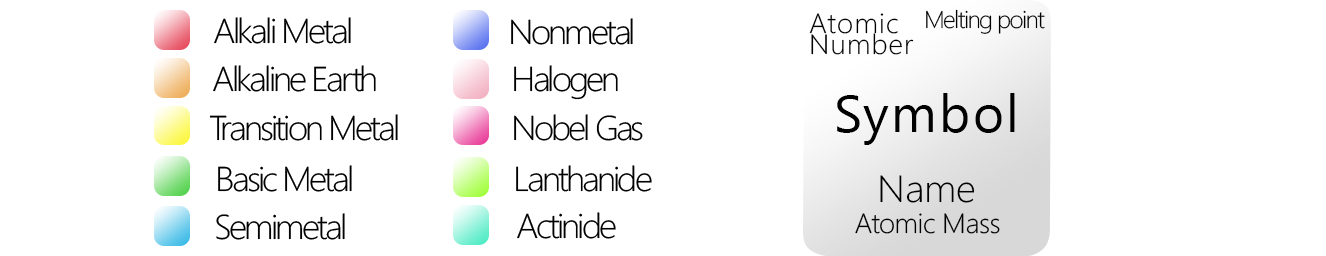
<style>
.page{position:relative;width:1326px;height:256px;background:#ffffff}
.page>*{position:absolute;margin:0}
.t1{font:34.6px "SegoeUI-Light";letter-spacing:-0.08em;color:#000000;scale:1.03 1}
.t2{font:27.7px/20.8px "SegoeUI-Light";letter-spacing:0.04em;color:#000000;scale:1.03 1}
.t3{font:24.2px "SegoeUI-Light";letter-spacing:-0.06em;color:#000000;scale:1.03 1}
.t4{font:51.9px "SegoeUI";letter-spacing:0.04em;color:#000000;scale:1.03 1}
.t5{font:34.6px "SegoeUI-Light";letter-spacing:-0.08em;color:#010101;scale:1.03 1}
.t6{font:38px "SegoeUI-Light";color:#000000;scale:1.03 1}
.t7{font:27.7px "SegoeUI-Light";letter-spacing:-0.02em;color:#000000;scale:1.03 1}
</style>
<div class="page">
<p class="t1" style="left:214px;top:17px;width:137px;height:27px">Alkali Metal</p>
<p class="t2" style="left:809px;top:13px;width:105px;height:42px">Atomic <br>Number</p>
<p class="t3" style="left:926px;top:9px;width:119px;height:25px">Melting point</p>
<p class="t1" style="left:511px;top:18px;width:122px;height:27px">Nonmetal</p>
<p class="t1" style="left:213px;top:65px;width:163px;height:27px">Alkaline Earth</p>
<p class="t1" style="left:514px;top:65px;width:104px;height:35px">Halogen</p>
<p class="t4" style="left:837px;top:93px;width:178px;height:52px">Symbol</p>
<p class="t1" style="left:209px;top:114px;width:189px;height:27px">Transition Metal</p>
<p class="t5" style="left:514px;top:114px;width:129px;height:27px">Nobel Gas</p>
<p class="t1" style="left:218px;top:165px;width:134px;height:27px">Basic Metal</p>
<p class="t1" style="left:516px;top:165px;width:136px;height:27px">Lanthanide</p>
<p class="t6" style="left:880px;top:175px;width:95px;height:28px">Name</p>
<p class="t1" style="left:216px;top:213px;width:129px;height:27px">Semimetal</p>
<p class="t1" style="left:517px;top:212px;width:99px;height:27px">Actinide</p>
<p class="t7" style="left:855px;top:213px;width:145px;height:21px">Atomic Mass</p>
</div>
